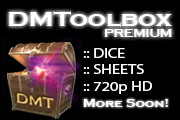
<style>
.page{position:relative;width:180px;height:120px;background:#000000}
.page>*{position:absolute;margin:0}
.t1{font:21.9px "CopperplateGothic-Bold";color:#ffffff;scale:1.17 1}
.t2{font:10.7px "CopperplateGothic-Bold";color:#ffffff;scale:1.17 1}
.t3{font:13.9px "MyriadPro-Regular";color:#ffffff;scale:1.17 1}
.t4{font:10.6px "CopperplateGothic-Bold";color:#ffffff;scale:1.25 1}
</style>
<div class="page">
<p class="t1" style="left:8px;top:11px;width:164px;height:16px">DMToolbox</p>
<p class="t2" style="left:104px;top:29px;width:68px;height:8px">PREMIUM</p>
<p class="t3" style="left:83px;top:48px;width:69px;height:46px">:: DICE<br>:: SHEETS<br>:: 720p HD</p>
<p class="t4" style="left:83px;top:99px;width:85px;height:8px">More Soon!</p>
</div>
